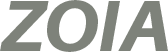
<style>
.page{position:relative;width:168px;height:52px;background:#ffffff}
.page>*{position:absolute;margin:0}
.t1{font:72px "Aileron-HeavyItalic";color:#7e827a}
</style>
<div class="page">
<p class="t1" style="left:0px;top:0px;width:168px;height:52px">ZOIA</p>
</div>
